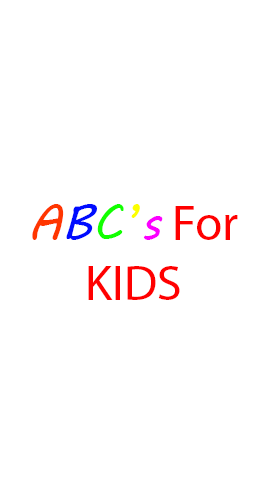
<style>
.page{position:relative;width:270px;height:480px;background:#ffffff}
.page>*{position:absolute;margin:0}
.t1{font:50px "MyriadPro-Regular";color:#ff0000}
.t2{font:50px "MVBoli";color:#ff3600}
.t3{font:50px "MVBoli";color:#000cff}
.t4{font:50px "MVBoli";color:#12ff00}
.t5{font:50px "MVBoli";color:#fcff00}
.t6{font:50px "MVBoli";color:#fc00ff}
</style>
<div class="page">
<p class="t1" style="left:32px;top:204px;width:206px;height:96px;text-align:center"><span class="t2">A</span><span class="t3">B</span><span class="t4">C</span><span class="t5">’</span><span class="t6">s </span>For<br>KIDS</p>
</div>
